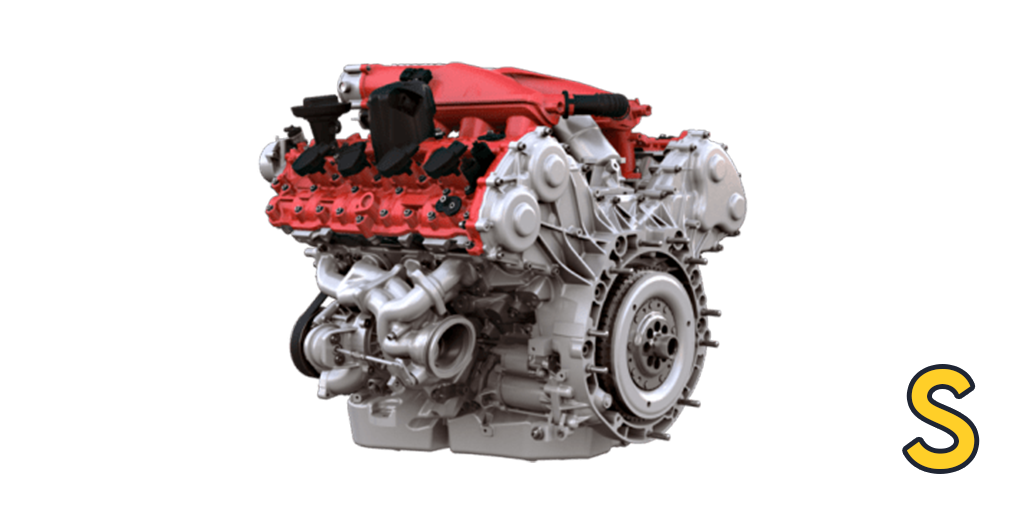
<style>
.page{position:relative;width:1024px;height:518px;background:#ffffff}
.page>*{position:absolute;margin:0}
.t1{font:123px "LEMONMILK-Regular";letter-spacing:0.1em;color:#ffcf28}
</style>
<div class="page">
<p class="t1" style="left:907px;top:369px;width:68px;height:100px">S</p>
</div>
